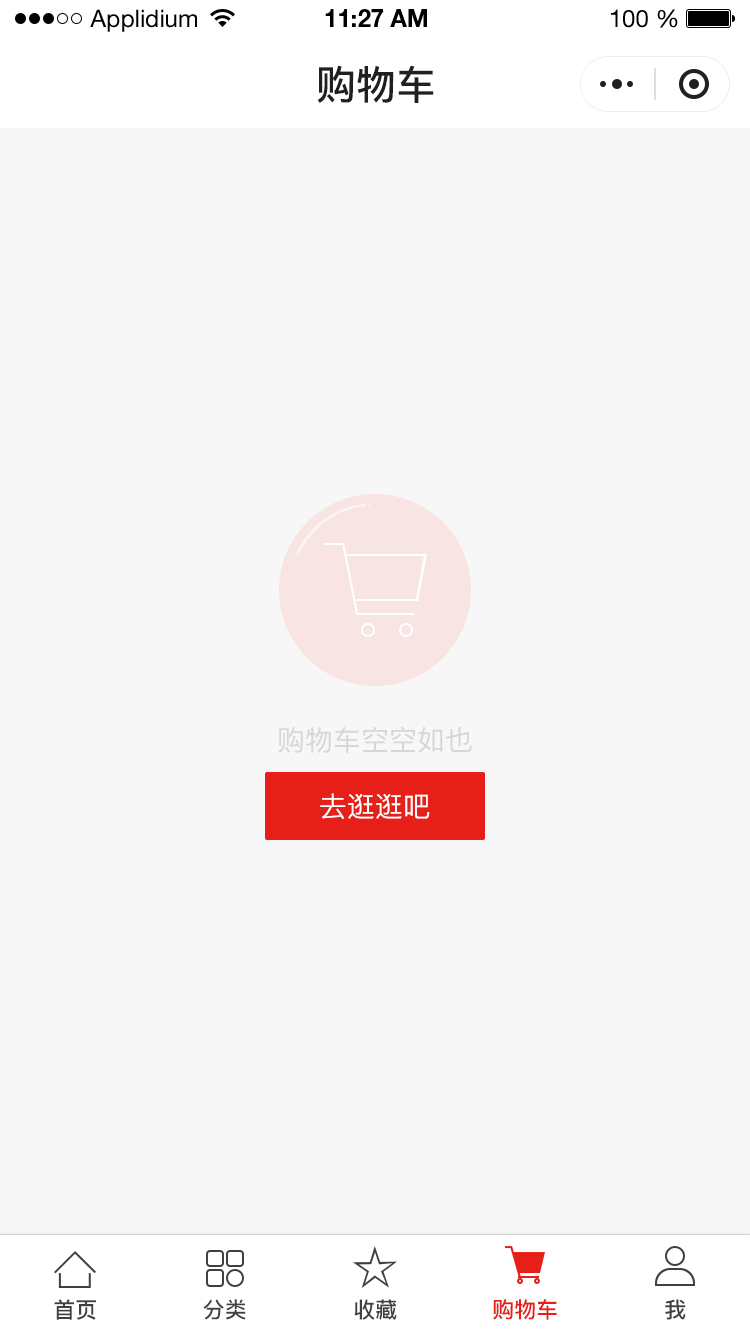
<style>
.page{position:relative;width:750px;height:1334px;background:#f7f7f7}
.page>*{position:absolute;margin:0}
.t1{font:24px "HelveticaNeueLTStd-Roman";color:#000000}
.t2{font:24px "HelveticaNeueLTStd-Bd";color:#000000}
.t3{font:40px "PingFang-SC-Bold";color:#202020;text-transform:uppercase}
.t4{font:28px "PingFang-SC-Medium";color:#d6d6d6;text-transform:uppercase}
.t5{font:28px "PingFang-SC-Medium";color:#fefefe;text-transform:uppercase}
.t6{font:22px "PingFang-SC-Bold";color:#404040;text-transform:uppercase}
.t7{font:22px "PingFang-SC-Bold";color:#e61f18;text-transform:uppercase}
</style>
<div class="page">
<p class="t1" style="left:90px;top:9px;width:107px;height:23px">Applidium</p>
<p class="t2" style="left:325px;top:9px;width:102px;height:18px">11:27 AM</p>
<p class="t1" style="left:611px;top:9px;width:67px;height:19px">100 %</p>
<p class="t3" style="left:317px;top:65px;width:117px;height:38px">购物车</p>
<p class="t4" style="left:278px;top:727px;width:194px;height:26px">购物车空空如也</p>
<p class="t5" style="left:320px;top:793px;width:110px;height:27px">去逛逛吧</p>
<p class="t6" style="left:54px;top:1299px;width:42px;height:21px">首页</p>
<p class="t6" style="left:203px;top:1299px;width:43px;height:21px">分类</p>
<p class="t6" style="left:354px;top:1299px;width:43px;height:21px">收藏</p>
<p class="t7" style="left:493px;top:1299px;width:64px;height:21px">购物车</p>
<p class="t6" style="left:665px;top:1299px;width:21px;height:21px">我</p>
</div>
